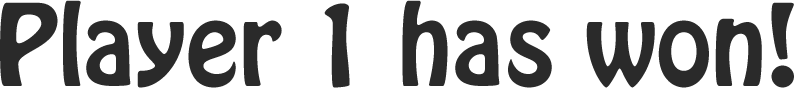
<style>
.page{position:relative;width:794px;height:88px;background:#ffffff}
.page>*{position:absolute;margin:0}
.t1{font:100px "HoboStd";color:#2a2a2a}
</style>
<div class="page">
<p class="t1" style="left:0px;top:0px;width:794px;height:88px">Player 1 has won!</p>
</div>
